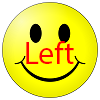
<style>
.page{position:relative;width:100px;height:100px;background:#ffffff}
.page>*{position:absolute;margin:0}
.t1{font:32px "MyriadPro-Regular";color:#ff0000}
</style>
<div class="page">
<p class="t1" style="left:26px;top:41px;width:48px;height:23px">Left</p>
</div>
